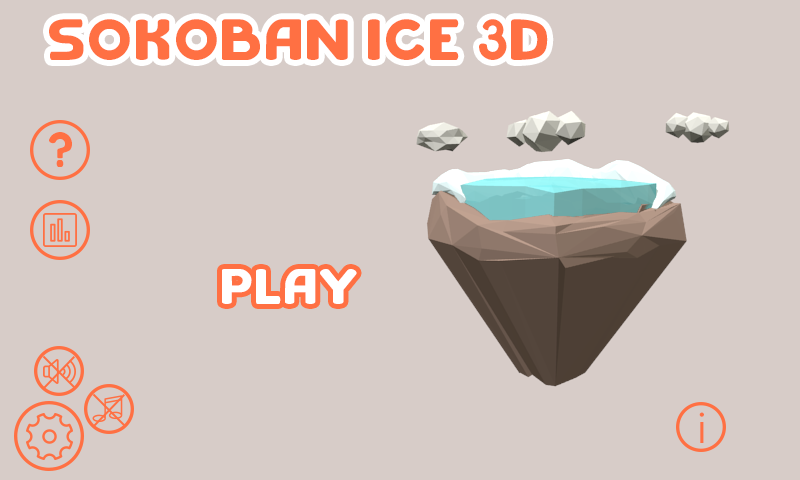
<style>
.page{position:relative;width:800px;height:480px;background:#d7ccc8}
.page>*{position:absolute;margin:0}
.t1{font:58.3px "shirota";color:#ff7043}
.t2{font:41.7px "shirota";color:#ff7043}
.t3{font:50px "shirota";color:#ffffff}
.t4{font:41.7px "SegoeUISymbol";color:#ff7043}
</style>
<div class="page">
<p class="t1" style="left:49px;top:19px;width:499px;height:41px">SOKOBAN ICE 3D</p>
<p class="t2" style="left:49px;top:132px;width:23px;height:35px">?</p>
<p class="t3" style="left:222px;top:269px;width:135px;height:35px">PLAY</p>
<p class="t4" style="left:699px;top:412px;width:5px;height:31px">i</p>
</div>
